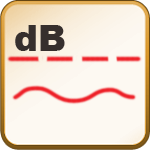
<style>
.page{position:relative;width:150px;height:150px;background:#fdf9f2}
.page>*{position:absolute;margin:0}
.t1{font:36px "Arial-Black";color:#362f2d}
</style>
<div class="page">
<p class="t1" style="left:15px;top:25px;width:50px;height:26px">dB</p>
</div>
